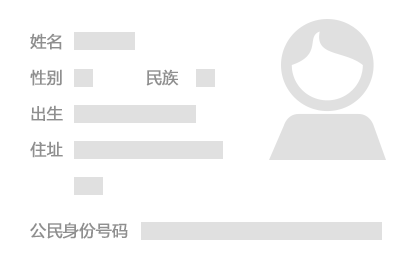
<style>
.page{position:relative;width:406px;height:258px;background:#ffffff}
.page>*{position:absolute;margin:0}
.t1{font:16px/36px "MicrosoftYaHei";color:#8f8f8f;font-weight:bold}
.t2{font:16px "MicrosoftYaHei";color:#8e8e8e;font-weight:bold}
</style>
<div class="page">
<p class="t1" style="left:30px;top:33px;width:149px;height:125px">姓名<br>性别                民族<br>出生<br>住址</p>
<p class="t2" style="left:30px;top:222px;width:98px;height:17px">公民身份号码</p>
</div>
